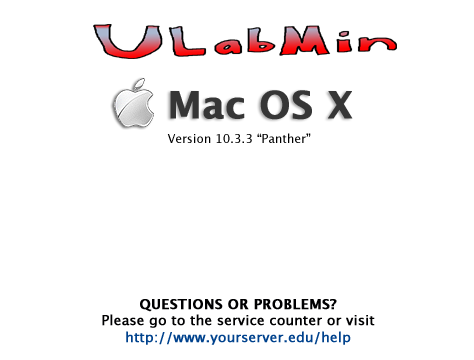
<style>
.page{position:relative;width:474px;height:360px;background:#ffffff}
.page>*{position:absolute;margin:0}
.t1{font:37.5px "LucidaGrande-Bold";color:#363636;font-weight:bold}
.t2{font:12px "LucidaGrande";color:#000000}
.t3{font:13.5px "LucidaGrande";color:#000001;font-weight:bold}
.t4{font:13.5px "LucidaGrande-Bold";color:#000001;font-weight:bold}
.t5{font:13.5px "LucidaGrande";color:#00428d;font-weight:bold}
</style>
<div class="page">
<p class="t1" style="left:170px;top:90px;width:183px;height:30px">Mac OS X</p>
<p class="t2" style="left:167px;top:133px;width:144px;height:10px">Version 10.3.3 “Panther”</p>
<p class="t3" style="left:102px;top:299px;width:273px;height:46px;text-align:center"><span class="t4">QUESTIONS OR PROBLEMS?<br></span>Please go to the service counter or visit<br><span class="t5">http://www.yourserver.edu/help</span></p>
</div>
